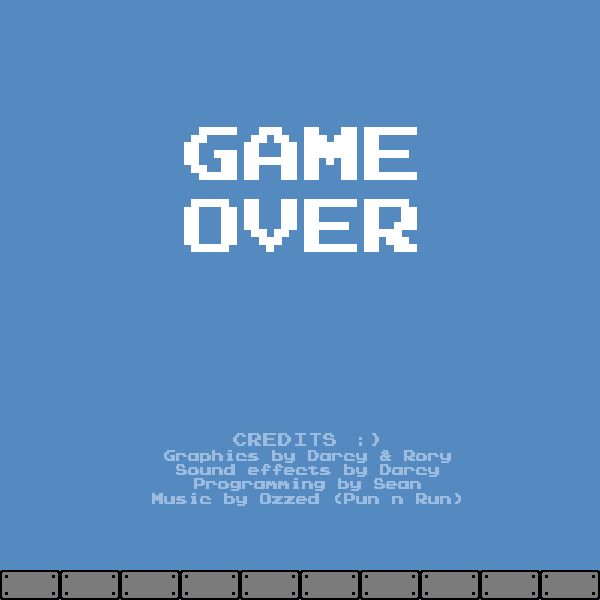
<style>
.page{position:relative;width:600px;height:600px;background:#548ac0}
.page>*{position:absolute;margin:0}
.t1{font:60px "PressStartK";letter-spacing:-0.001em;color:#ffffff}
.t2{font:12px "PressStartK";letter-spacing:-0.001em;color:#9bbcde}
.t3{font:15px "PressStartK";letter-spacing:-0.001em;color:#9bbcde}
</style>
<div class="page">
<p class="t1" style="left:184px;top:127px;width:233px;height:125px">GAME<br>OVER</p>
<p class="t2" style="left:152px;top:433px;width:309px;height:73px;text-align:center"><span class="t3">CREDITS :)<br></span>Graphics by Darcy &amp; Rory<br>Sound effects by Darcy<br>Programming by Sean<br>Music by Ozzed (Pun n Run)</p>
</div>
